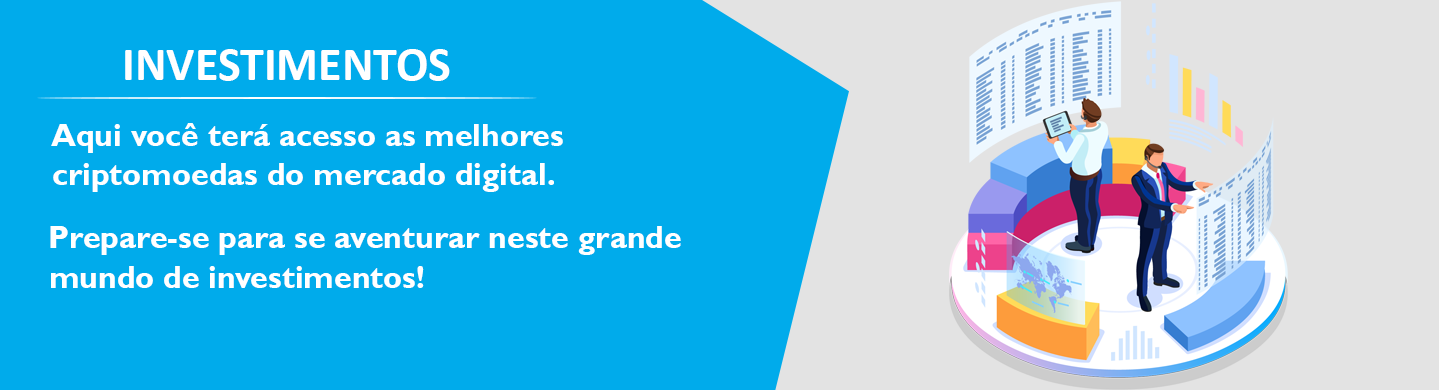
<style>
.page{position:relative;width:1439px;height:390px;background:#00abeb}
.page>*{position:absolute;margin:0}
.t1{font:48px "Calibri-Bold";color:#ffffff}
.t2{font:32px "GillSansMT-Bold";color:#ffffff}
</style>
<div class="page">
<p class="t1" style="left:125px;top:49px;width:325px;height:32px">INVESTIMENTOS</p>
<p class="t2" style="left:51px;top:123px;width:512px;height:30px">Aqui você terá acesso as melhores</p>
<p class="t2" style="left:53px;top:163px;width:501px;height:29px">criptomoedas do mercado digital.</p>
<p class="t2" style="left:50px;top:226px;width:631px;height:29px">Prepare-se para se aventurar neste grande</p>
<p class="t2" style="left:51px;top:266px;width:373px;height:22px">mundo de investimentos!</p>
</div>
